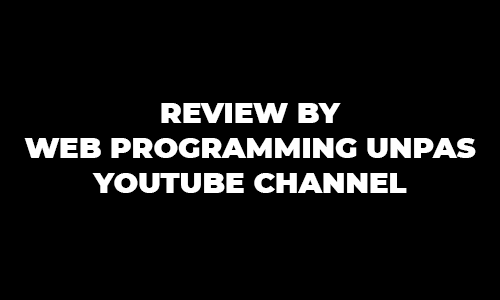
<style>
.page{position:relative;width:500px;height:300px;background:#000000}
.page>*{position:absolute;margin:0}
.t1{font:29.2px "Montserrat-Black";color:#ffffff}
</style>
<div class="page">
<p class="t1" style="left:24px;top:103px;width:452px;height:90px;text-align:center">REVIEW BY<br>WEB PROGRAMMING UNPAS<br>YOUTUBE CHANNEL</p>
</div>
